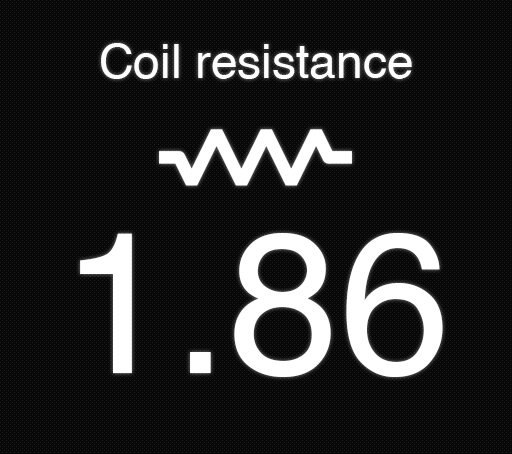
<style>
.page{position:relative;width:512px;height:454px;background:#080808}
.page>*{position:absolute;margin:0}
.t1{font:48px "Helvetica";color:#ffffff}
.t2{font:200px "Helvetica";color:#ffffff}
</style>
<div class="page">
<p class="t1" style="left:101px;top:43px;width:311px;height:36px">Coil resistance</p>
<p class="t2" style="left:80px;top:233px;width:363px;height:144px">1.86</p>
</div>
